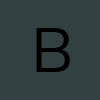
<style>
.page{position:relative;width:100px;height:100px;background:#324041}
.page>*{position:absolute;margin:0}
.t1{font:62.5px "Muli-Regular";color:#000000}
</style>
<div class="page">
<p class="t1" style="left:36px;top:28px;width:34px;height:44px">B</p>
</div>
